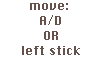
<style>
.page{position:relative;width:102px;height:68px;background:#ffffff}
.page>*{position:absolute;margin:0}
.t1{font:12.4px "ChicagoFLF";color:#65524d}
</style>
<div class="page">
<p class="t1" style="left:22px;top:3px;width:58px;height:52px;text-align:center">move: <br>A/D<br>OR<br>left stick</p>
</div>
